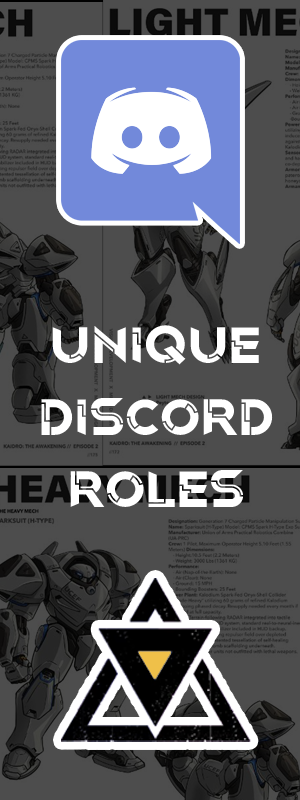
<style>
.page{position:relative;width:300px;height:800px;background:#4d4d4d}
.page>*{position:absolute;margin:0}
.t1{font:53px/71.7px "OriginTechDemoRegular";color:#ffffff;scale:1.03 1}
</style>
<div class="page">
<p class="t1" style="left:41px;top:325px;width:232px;height:182px;text-align:center">unique<br>discord<br>roles</p>
</div>
